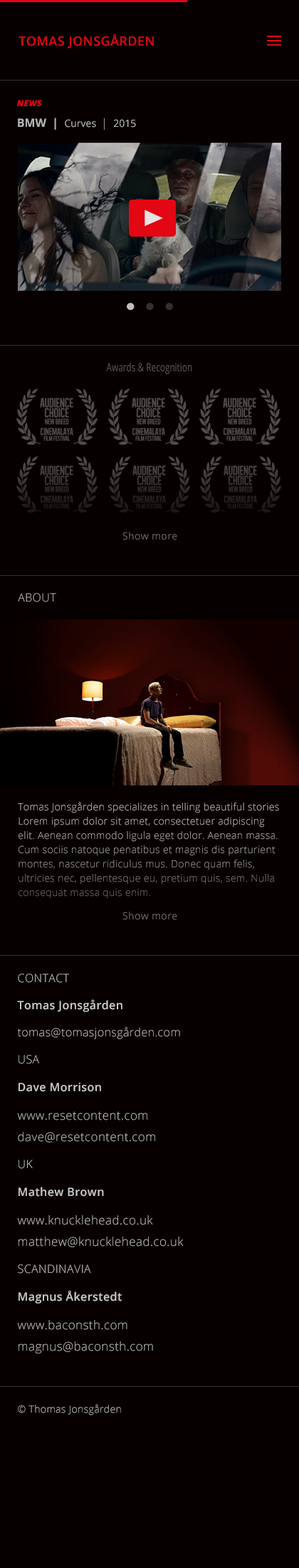
<style>
.page{position:relative;width:299px;height:1568px;background:#070000}
.page>*{position:absolute;margin:0}
.t1{font:12.8px/53.5px "OpenSans-Semibold";letter-spacing:0.025em;color:#e30613}
.t2{font:17.8px/53.5px "OpenSans";letter-spacing:0.025em;color:#e30613}
.t3{font:8.6px "OpenSans-ExtraboldItalic";letter-spacing:0.025em;color:#e30613}
.t4{font:11.4px "OpenSans-Bold";color:#b5b5b5;font-variant:small-caps}
.t5{font:12.8px "OpenSans-ExtraboldItalic";letter-spacing:0.025em;color:#911827}
.t6{font:10px "OpenSans";color:#b5b5b5;font-variant:small-caps}
.t7{font:10px "OpenSans";color:#b5b5b5}
.t8{font:11.4px "OpenSans-Light";color:#b5b5b5}
.t9{font:11.4px "OpenSans";color:#535353;scale:0.74 1}
.t10{font:10px "OpenSans";letter-spacing:0.025em;color:#626262}
.t11{font:11.4px "OpenSans-Light";letter-spacing:0.025em;color:#b5b5b5}
.t12{font:10px/14.3px "OpenSans-Light";letter-spacing:0.025em}
.t13{font:12.1px/14.3px "OpenSans-Light";letter-spacing:0.025em;color:#bfbfbf}
.t14{font:11.4px/13.5px "OpenSans-Light";letter-spacing:0.025em;color:#bfbfbf}
.t15{font:11.4px/13.5px "OpenSans-Semibold";letter-spacing:0.025em;color:#c9c9c9}
.t16{font:11.4px/14.3px "OpenSans-Semibold";letter-spacing:0.025em;color:#c9c9c9}
.t17{font:10px "OpenSans-Light";letter-spacing:0.025em;color:#bfbfbf}
</style>
<div class="page">
<p class="t1" style="left:19px;top:34px;width:135px;height:14px">TOMAS JONSGÅRDEN<br><span class="t2"><br><br>SGÅRDEN</span></p>
<p class="t3" style="left:17px;top:100px;width:25px;height:6px">NEWS</p>
<p class="t4" style="left:18px;top:118px;width:118px;height:12px"><span class="t5"><br></span>BMW  |  <span class="t6">C</span><span class="t7">urves  </span><span class="t8">|  </span><span class="t7">2015</span></p>
<p class="t9" style="left:106px;top:362px;width:86px;height:12px">Awards &amp; Recognition</p>
<p class="t10" style="left:123px;top:532px;width:54px;height:8px">Show more</p>
<p class="t11" style="left:18px;top:593px;width:38px;height:9px">ABOUT</p>
<p class="t12" style="left:18px;top:802px;width:261px;height:97px">Tomas Jonsgården specializes in telling beautiful stories Lorem ipsum dolor sit amet, consectetuer adipiscing elit. Aenean commodo ligula eget dolor. Aenean massa. Cum sociis natoque penatibus et magnis dis parturient montes, nascetur ridiculus mus. Donec quam felis, ultricies nec, pellentesque eu, pretium quis, sem. Nulla consequat massa quis enim.</p>
<p class="t10" style="left:123px;top:912px;width:54px;height:8px">Show more</p>
<p class="t13" style="left:17px;top:974px;width:167px;height:379px"><span class="t14">CONTACT<br><br></span><span class="t15">Tomas Jonsgården<br></span><span class="t14"><br>tomas@tomasjonsgården.com<br><br>USA<br><br></span><span class="t16">Dave Morrison <br></span><br>www.resetcontent.com<br><br>dave@resetcontent.com<br><br><span class="t14">UK<br><br></span><span class="t16">Mathew Brown<br><br></span>www.knucklehead.co.uk<br><br>matthew@knucklehead.co.uk<br><br><span class="t14">SCANDINAVIA<br><br></span><span class="t16">Magnus Åkerstedt<br><br></span>www.baconsth.com<br><br>magnus@baconsth.com</p>
<p class="t17" style="left:18px;top:1404px;width:103px;height:11px">© Thomas Jonsgården</p>
</div>
